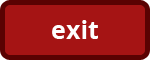
<style>
.page{position:relative;width:150px;height:60px;background:#a51414}
.page>*{position:absolute;margin:0}
.t1{font:25px "OpenSans-Bold";color:#ffffff}
</style>
<div class="page">
<p class="t1" style="left:52px;top:20px;width:46px;height:19px">exit</p>
</div>
